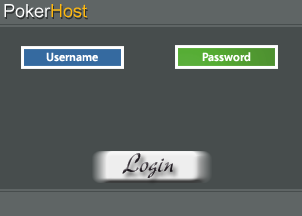
<style>
.page{position:relative;width:302px;height:216px;background:#474d4d}
.page>*{position:absolute;margin:0}
.t1{font:18px "ArialUnicodeMS";color:#ffffff}
.t2{font:18px "ArialUnicodeMS";color:#ffb90f}
.t3{font:12px "MyriadPro-Semibold";color:#ffffff}
.t4{font:29px "NewBerolinaMTStd";color:#2a242b;font-style:italic;scale:0.83 1}
</style>
<div class="page">
<p class="t1" style="left:4px;top:4px;width:83px;height:14px">Poker<span class="t2">Host</span></p>
<p class="t3" style="left:46px;top:52px;width:52px;height:10px">Username</p>
<p class="t3" style="left:202px;top:52px;width:49px;height:10px">Password</p>
<p class="t4" style="left:122px;top:153px;width:51px;height:25px">Login</p>
</div>
